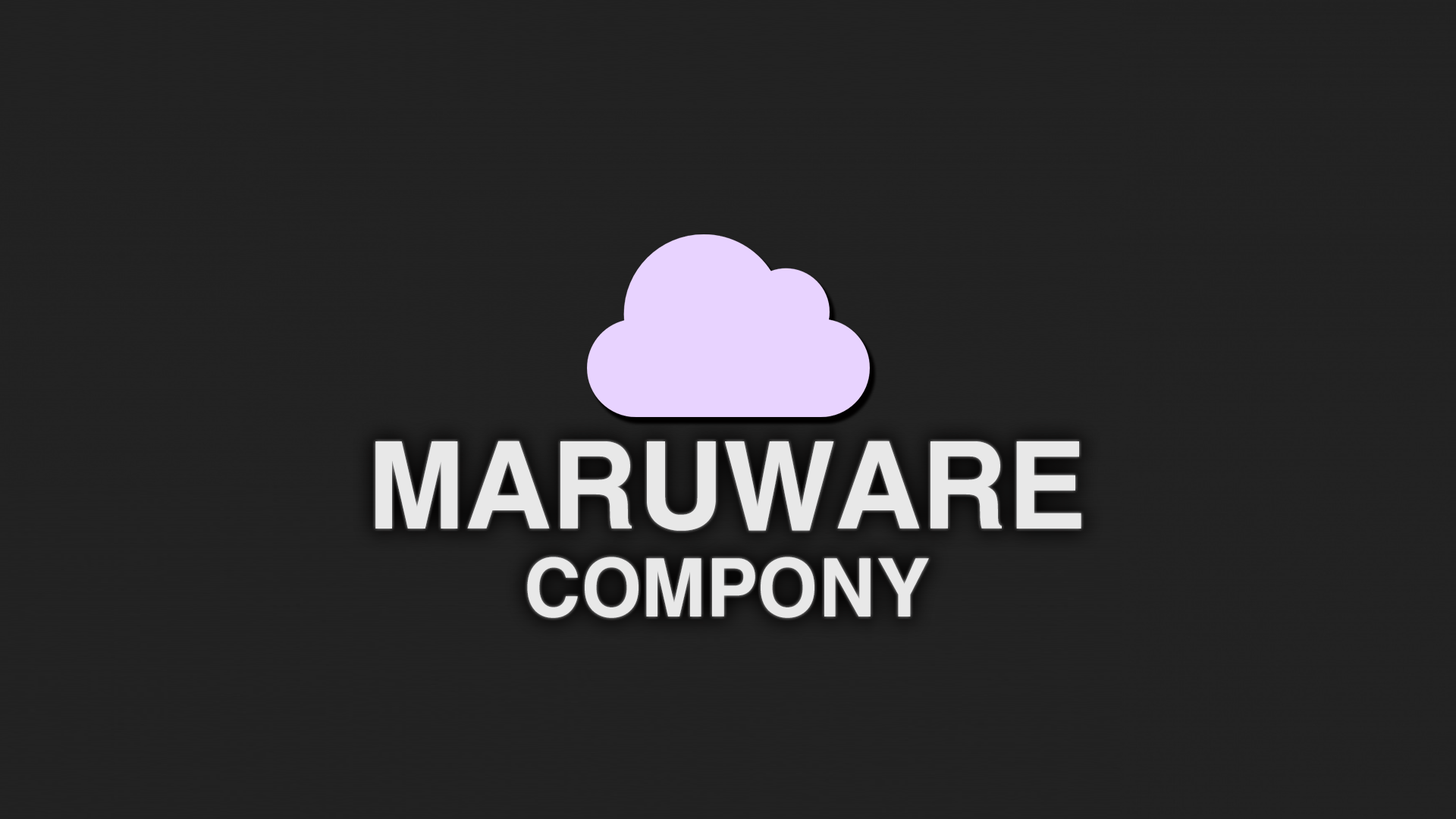
<style>
.page{position:relative;width:1456px;height:819px;background:#222222}
.page>*{position:absolute;margin:0}
.t1{font:113.7px "HYgtrE";letter-spacing:-0.03em;color:#e8e8e8}
.t2{font:75.8px "HYgtrE";letter-spacing:-0.03em;color:#e8e8e8}
</style>
<div class="page">
<p class="t1" style="left:375px;top:441px;width:706px;height:90px">MARUWARE</p>
<p class="t2" style="left:527px;top:557px;width:402px;height:61px">COMPONY</p>
</div>
